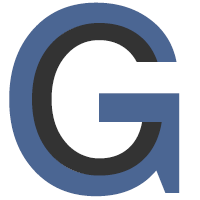
<style>
.page{position:relative;width:200px;height:200px;background:#ffffff}
.page>*{position:absolute;margin:0}
.t1{font:256.4px "Helsinki";color:#4b6693}
.t2{font:202px "Helsinki";color:#333333}
</style>
<div class="page">
<p class="t1" style="left:9px;top:2px;width:171px;height:195px">G</p>
<p class="t2" style="left:32px;top:23px;width:130px;height:153px">C</p>
</div>
